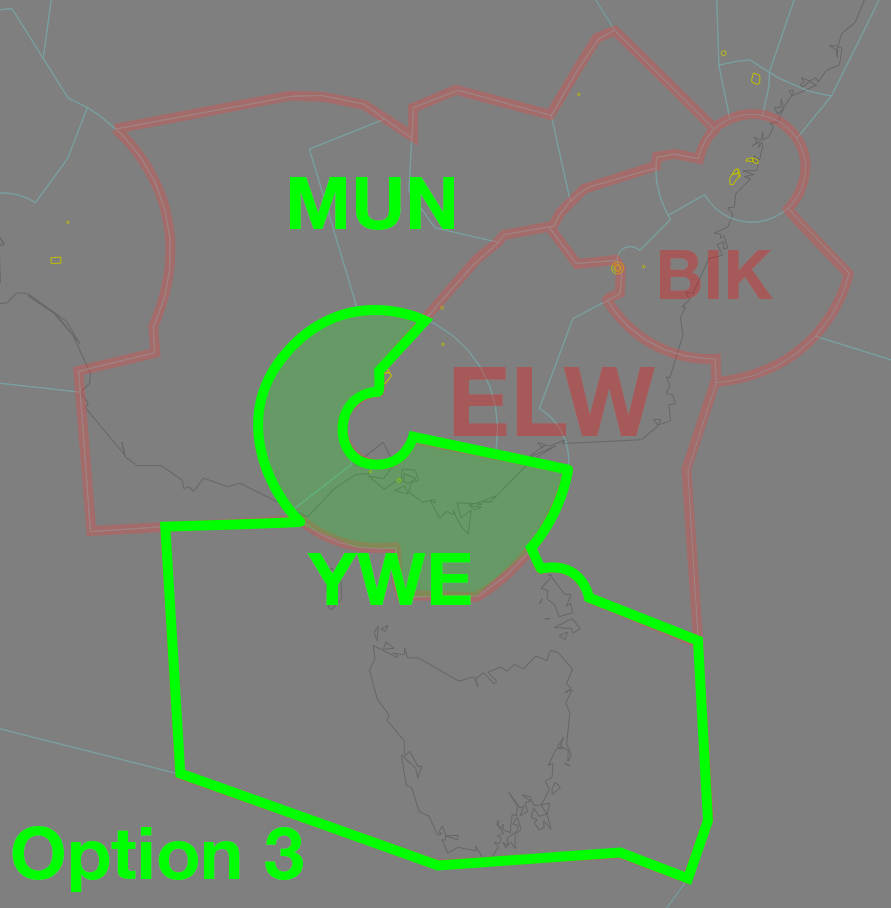
<style>
.page{position:relative;width:891px;height:908px;background:#7f7f7f}
.page>*{position:absolute;margin:0}
.t1{font:72.5px "HelveticaNeueLTStd-Bd";color:#00ff00}
.t2{font:68.7px "HelveticaNeueLTStd-Bd";color:#a65959}
.t3{font:97.3px "HelveticaNeueLTStd-Bd";color:#a65959}
</style>
<div class="page">
<p class="t1" style="left:290px;top:177px;width:164px;height:53px">MUN</p>
<p class="t2" style="left:660px;top:250px;width:113px;height:49px">BIK</p>
<p class="t3" style="left:453px;top:367px;width:202px;height:69px">ELW</p>
<p class="t1" style="left:307px;top:553px;width:164px;height:52px">YWE</p>
<p class="t1" style="left:12px;top:826px;width:291px;height:66px">Option 3</p>
</div>
